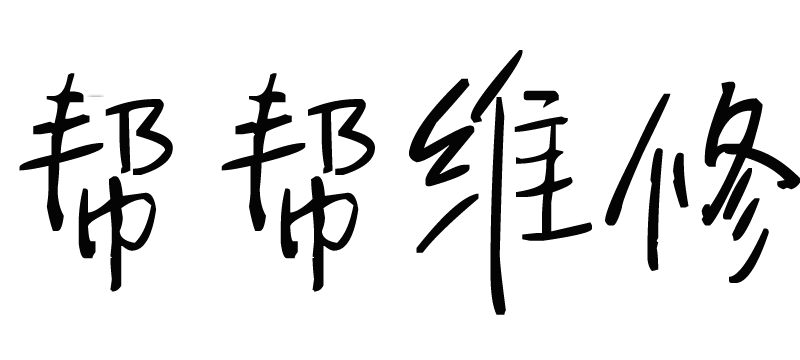
<style>
.page{position:relative;width:800px;height:360px;background:#ffffff}
.page>*{position:absolute;margin:0}
.t1{font:200px "SentyTEA-basic";color:#040404;text-transform:uppercase}
</style>
<div class="page">
<p class="t1" style="left:19px;top:50px;width:782px;height:265px">帮帮维修</p>
</div>
